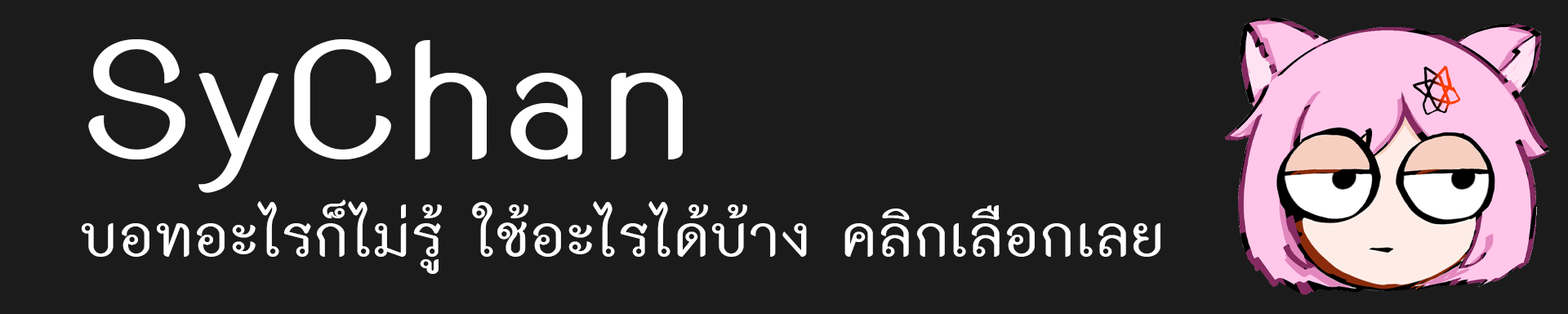
<style>
.page{position:relative;width:1568px;height:314px;background:#1b1b1b}
.page>*{position:absolute;margin:0}
.t1{font:81.7px "THK2DJuly8-Bold";color:#ffffff}
.t2{font:245px "THK2DJuly8-Bold";color:#ffffff}
</style>
<div class="page">
<p class="t1" style="left:81px;top:39px;width:1079px;height:235px"><span class="t2">SyChan<br></span>บอทอะไรก็ไม่รู้ ใช้อะไรได้บ้าง คลิกเลือกเลย</p>
</div>
